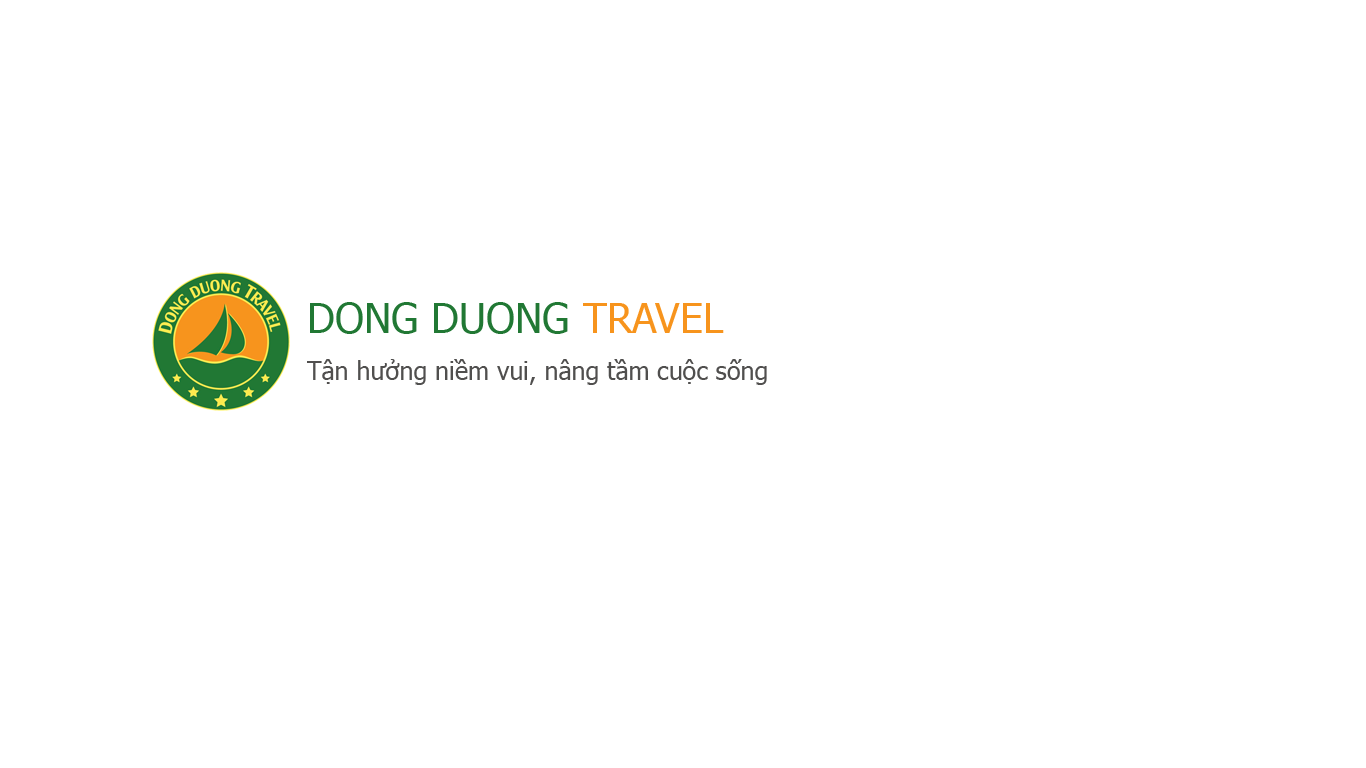
<style>
.page{position:relative;width:1366px;height:768px;background:#ffffff}
.page>*{position:absolute;margin:0}
.t1{font:41px "Tahoma";color:#217834}
.t2{font:41px "Tahoma";color:#f7941d}
.t3{font:25px "Tahoma";color:#504f4e}
</style>
<div class="page">
<p class="t1" style="left:310px;top:302px;width:414px;height:32px">DONG DUONG <span class="t2">TRAVEL</span></p>
<p class="t3" style="left:307px;top:359px;width:460px;height:26px">Tận hưởng niềm vui, nâng tầm cuộc sống</p>
</div>
